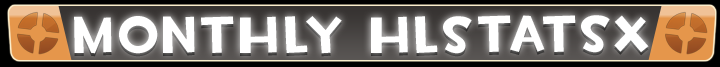
<style>
.page{position:relative;width:720px;height:67px}
.page>*{position:absolute;margin:0}
.t1{font:52px "TF2Build";letter-spacing:0.1em;color:#ffffff}
</style>
<div class="page">
<p class="t1" style="left:74px;top:15px;width:575px;height:39px">monthly Hlstatsx</p>
</div>
